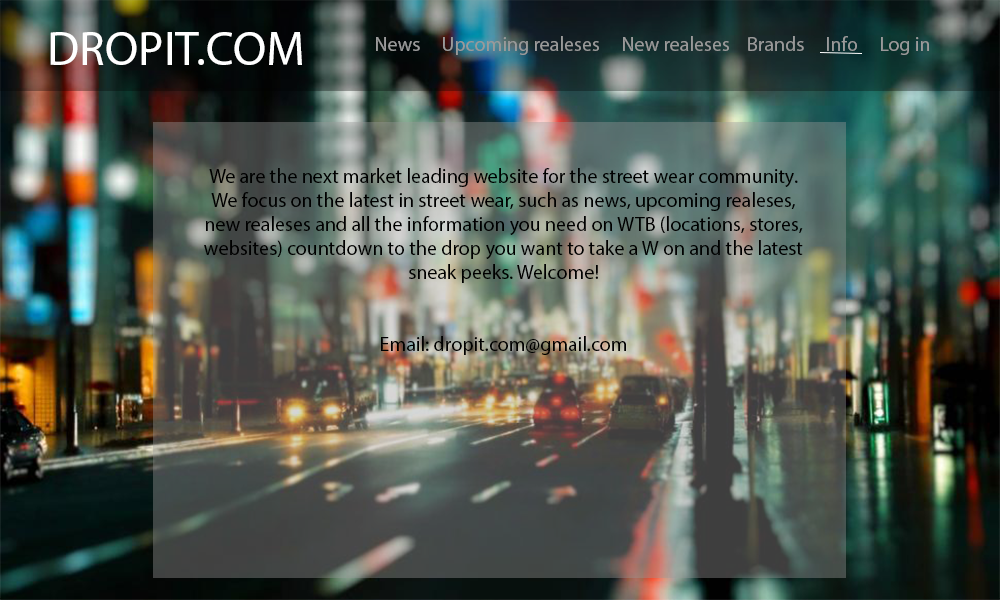
<style>
.page{position:relative;width:1000px;height:600px}
.page>*{position:absolute;margin:0}
.t1{font:48px "MyriadPro-Regular";color:#ffffff}
.t2{font:20px "MyriadPro-Regular";color:#848484}
.t3{font:20px "MyriadPro-Regular";color:#000000}
</style>
<div class="page">
<p class="t1" style="left:50px;top:32px;width:252px;height:33px">DROPIT.COM</p>
<p class="t2" style="left:376px;top:36px;width:553px;height:19px">News     Upcoming realeses     New realeses    Brands     Info     Log in</p>
<p class="t3" style="left:204px;top:168px;width:599px;height:187px;text-align:center">We are the next market leading website for the street wear community. We focus on the latest in street wear, such as news, upcoming realeses, new realeses and all the information you need on WTB (locations, stores, websites) countdown to the drop you want to take a W on and the latest sneak peeks. Welcome!<br><br><br>Email: dropit.com@gmail.com</p>
</div>
